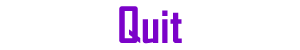
<style>
.page{position:relative;width:300px;height:50px;background:#ffffff}
.page>*{position:absolute;margin:0}
.t1{font:48px "AgencyFB-Bold";color:#7b02c9}
</style>
<div class="page">
<p class="t1" style="left:119px;top:6px;width:63px;height:38px">Quit</p>
</div>
